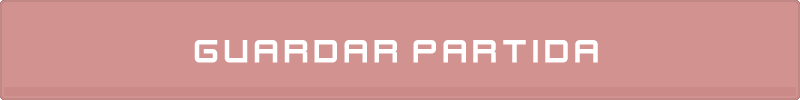
<style>
.page{position:relative;width:800px;height:100px;background:#d19290}
.page>*{position:absolute;margin:0}
.t1{font:36px "KenVector-Future";color:#ffffff}
</style>
<div class="page">
<p class="t1" style="left:194px;top:40px;width:404px;height:23px">guardar partida</p>
</div>
